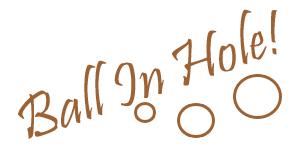
<style>
.page{position:relative;width:300px;height:150px;background:#ffffff}
.page>*{position:absolute;margin:0}
.t1{font:63px "Pristina-Regular";color:#9c6234}
</style>
<div class="page">
<p class="t1" style="left:18px;top:9px;width:259px;height:130px;rotate:-19deg">Ball In Hole!</p>
</div>
